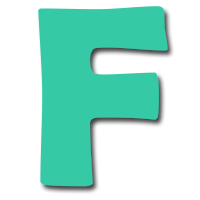
<style>
.page{position:relative;width:200px;height:200px;background:#ffffff}
.page>*{position:absolute;margin:0}
.t1{font:256.9px "BerlinSansFBDemi-Bold";color:#36c9a5}
</style>
<div class="page">
<p class="t1" style="left:38px;top:6px;width:130px;height:181px">F</p>
</div>
